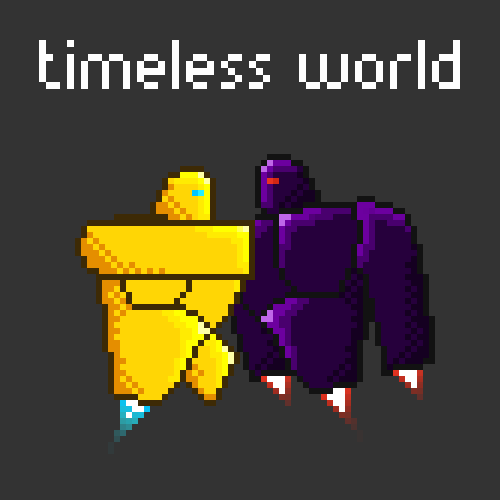
<style>
.page{position:relative;width:500px;height:500px;background:#333333}
.page>*{position:absolute;margin:0}
.t1{font:72px "Munro";color:#ffffff}
</style>
<div class="page">
<p class="t1" style="left:39px;top:40px;width:421px;height:49px">timeless world</p>
</div>
